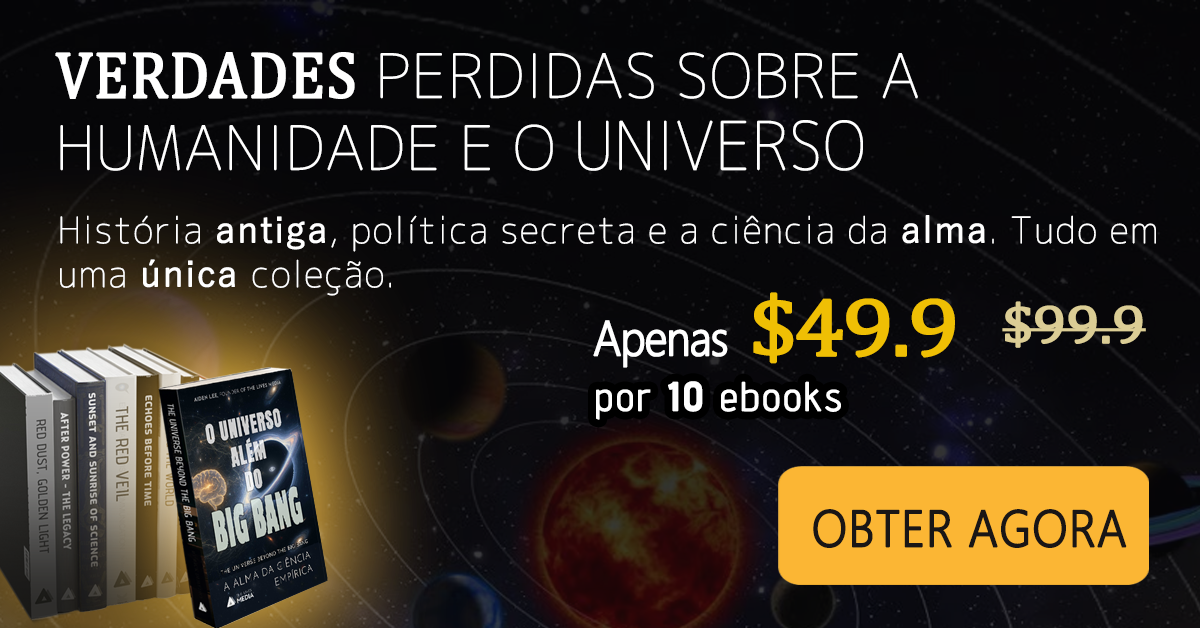
<style>
.page{position:relative;width:1200px;height:628px}
.page>*{position:absolute;margin:0}
.t1{font:60px "Chogokuboso-Gothic";letter-spacing:0.005em;color:#ffffff;font-weight:bold}
.t2{font:66px "Cambria";letter-spacing:0.005em;color:#ffffff;font-weight:bold;scale:0.91 1}
.t3{font:66px "Chogokuboso-Gothic";letter-spacing:0.005em;color:#ffffff;font-weight:bold;scale:0.91 1}
.t4{font:36px/44px "Chogokuboso-Gothic";letter-spacing:0.025em;color:#ffffff;font-weight:bold}
.t5{font:36px/44px "YuGothic-Regular";letter-spacing:0.025em;color:#ffffff;font-weight:bold}
.t6{font:48px "MalgunGothic-Semilight";letter-spacing:-0.05em;color:#ffffff;font-weight:bold;scale:0.9 1}
.t7{font:82.8px "Cambria";letter-spacing:-0.05em;color:#efbf04;font-weight:bold;scale:1.11 1}
.t8{font:54px "Cambria";letter-spacing:-0.025em;color:#dbcd95;font-weight:bold;scale:1.11 1}
.t9{font:40px "AdventPro-Regular";letter-spacing:0.05em;color:#ffffff;font-weight:bold}
.t10{font:40px "AdventPro-Bold";letter-spacing:0.05em;color:#ffffff;font-weight:bold}
.t11{font:50.3px "MalgunGothic-Semilight";letter-spacing:0.005em;color:#191616;font-weight:bold;scale:0.9 1}
</style>
<div class="page">
<p class="t1" style="left:55px;top:52px;width:863px;height:119px"><span class="t2">VERDADES</span> PERDIDAS SOBRE A HUMANIDADE E O <span class="t3">UNIVERSO</span></p>
<p class="t4" style="left:60px;top:215px;width:1096px;height:81px">História <span class="t5">antiga</span>, política secreta e a ciência da <span class="t5">alma</span>. Tudo em uma <span class="t5">única </span>coleção.</p>
<p class="t6" style="left:593px;top:292px;width:362px;height:76px">Apenas  <span class="t7">$49.9</span></p>
<p class="t8" style="left:1002px;top:301px;width:144px;height:47px">$99.9</p>
<p class="t9" style="left:596px;top:381px;width:245px;height:39px">por <span class="t10">10</span> ebooks</p>
<p class="t11" style="left:813px;top:509px;width:314px;height:39px">OBTER AGORA</p>
</div>
